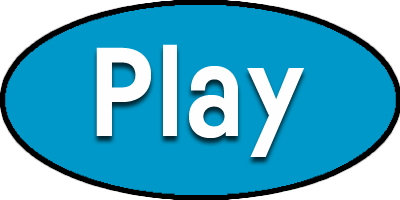
<style>
.page{position:relative;width:400px;height:200px;background:#0098c8}
.page>*{position:absolute;margin:0}
.t1{font:125px "Fabrikat-Bold";letter-spacing:0.01em;color:#fefefe}
</style>
<div class="page">
<p class="t1" style="left:96px;top:44px;width:208px;height:113px">Play</p>
</div>
